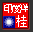
<style>
.page{position:relative;width:33px;height:32px;background:#f20000}
.page>*{position:absolute;margin:0}
.t1{font:10.4px "SimSun";letter-spacing:-0.25em;color:#ffffff}
.t2{font:11.7px "SimSun";color:#ffffff}
</style>
<div class="page">
<p class="t1" style="left:4px;top:4px;width:24px;height:9px">印度洋</p>
<p class="t2" style="left:16px;top:15px;width:11px;height:12px">桂</p>
</div>
